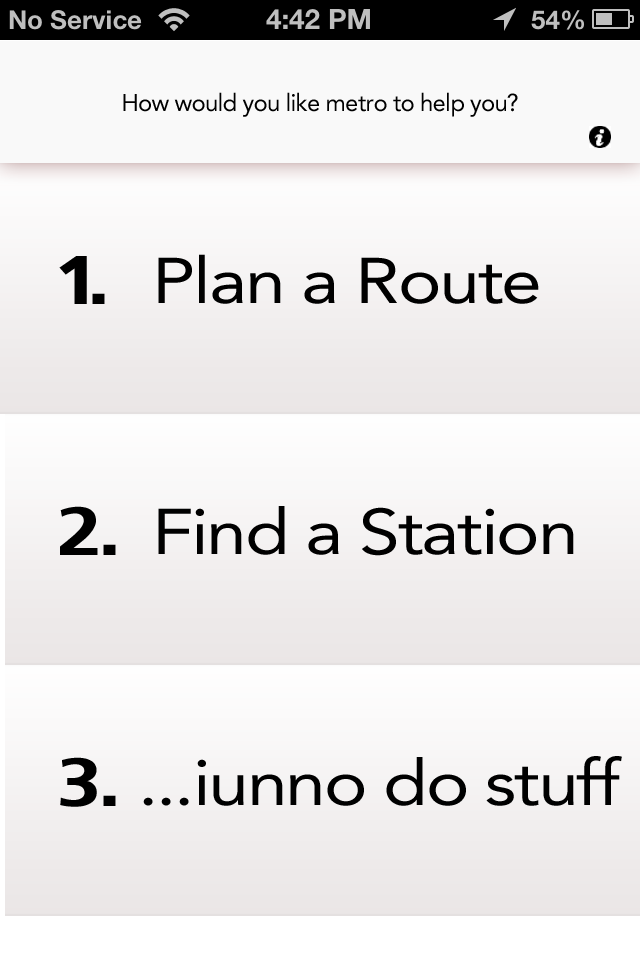
<style>
.page{position:relative;width:640px;height:960px}
.page>*{position:absolute;margin:0}
.t1{font:24px "Avenir-Roman";letter-spacing:-0.03em;color:#000000}
.t2{font:63.7px "CharcoalCY";letter-spacing:-0.03em;color:#000000;scale:1.15 1}
.t3{font:63.7px "Avenir-Roman";letter-spacing:-0.03em;color:#000000;scale:1.15 1}
</style>
<div class="page">
<p class="t1" style="left:123px;top:92px;width:395px;height:25px">How would you like metro to help you?</p>
<p class="t2" style="left:59px;top:256px;width:46px;height:48px">1.</p>
<p class="t3" style="left:158px;top:254px;width:381px;height:50px">Plan a Route</p>
<p class="t2" style="left:60px;top:506px;width:56px;height:49px">2.</p>
<p class="t3" style="left:158px;top:506px;width:416px;height:50px">Find a Station</p>
<p class="t2" style="left:60px;top:757px;width:56px;height:50px">3.</p>
<p class="t3" style="left:143px;top:756px;width:479px;height:50px">...iunno do stuff</p>
</div>
